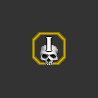
<style>
.page{position:relative;width:98px;height:98px;background:#333333}
.page>*{position:absolute;margin:0}
.t1{font:18px "BernardMT-Condensed";color:#ffffff}
</style>
<div class="page">
<p class="t1" style="left:46px;top:37px;width:6px;height:14px">I</p>
</div>
